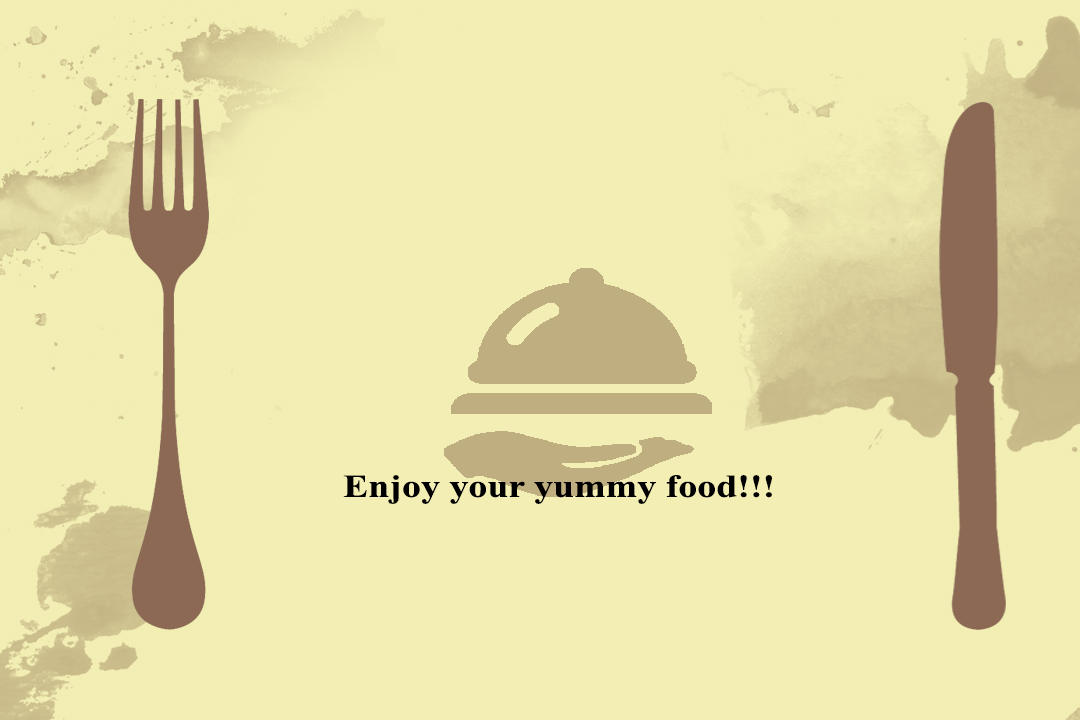
<style>
.page{position:relative;width:1080px;height:720px;background:#f3eeb4}
.page>*{position:absolute;margin:0}
.t1{font:32.1px "TimesNewRomanPS-BoldMT";color:#000000;scale:1.18 1}
</style>
<div class="page">
<p class="t1" style="left:343px;top:475px;width:429px;height:29px">Enjoy your yummy food!!!</p>
</div>
